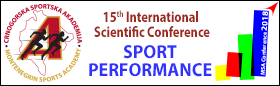
<style>
.page{position:relative;width:280px;height:86px;background:#ffffff}
.page>*{position:absolute;margin:0}
.t1{font:15.1px/14.8px "MyriadPro-Bold";color:#9e291f;scale:0.82 1}
.t2{font:8.3px "MyriadPro-Bold";color:#ffffff;text-transform:uppercase;scale:1.04 1}
.t3{font:5.7px "MyriadPro-Bold";color:#ffffff;scale:1.04 1}
.t4{font:18.8px/18.5px "MyriadPro-Bold";color:#3232ff;text-transform:uppercase;scale:0.96 1}
</style>
<div class="page">
<p class="t1" style="left:94px;top:10px;width:116px;height:27px;text-align:center">15th International <br>Scientific Conference</p>
<p class="t2" style="left:261px;top:11px;width:7px;height:20px;rotate:-87deg">2018</p>
<p class="t3" style="left:260px;top:32px;width:7px;height:43px;rotate:-87deg">MSA Conference</p>
<p class="t4" style="left:89px;top:45px;width:123px;height:32px;text-align:center">SPORT<br>PERFORMANCE</p>
</div>
